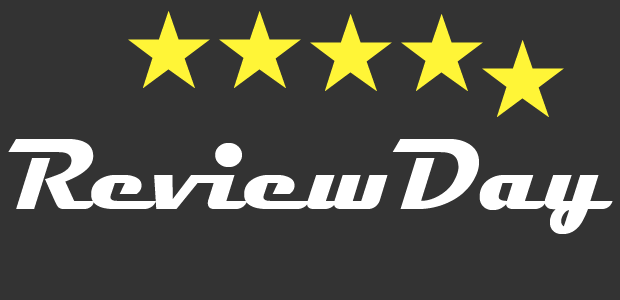
<style>
.page{position:relative;width:620px;height:300px;background:#333333}
.page>*{position:absolute;margin:0}
.t1{font:102px "Gulim";color:#fff537}
.t2{font:102px "Magneto-Bold";color:#ffffff}
</style>
<div class="page">
<p class="t1" style="left:128px;top:11px;width:82px;height:77px">★</p>
<p class="t1" style="left:219px;top:11px;width:82px;height:77px">★</p>
<p class="t1" style="left:310px;top:14px;width:82px;height:77px">★</p>
<p class="t1" style="left:401px;top:14px;width:82px;height:77px">★</p>
<p class="t1" style="left:482px;top:40px;width:82px;height:77px">★</p>
<p class="t2" style="left:8px;top:139px;width:605px;height:95px">ReviewDay</p>
</div>
